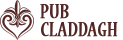
<style>
.page{position:relative;width:123px;height:40px;background:#ffffff}
.page>*{position:absolute;margin:0}
.t1{font:22px/18px "NuevaStd-Cond";color:#552626;text-transform:uppercase;font-weight:bold}
</style>
<div class="page">
<p class="t1" style="left:40px;top:4px;width:78px;height:33px">Pub<br>Claddagh</p>
</div>
